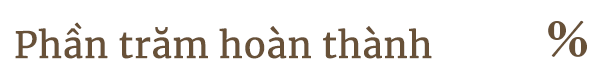
<style>
.page{position:relative;width:600px;height:77px;background:#ffffff}
.page>*{position:absolute;margin:0}
.t1{font:36px "Merriweather-Regular";color:#685138;font-weight:bold}
</style>
<div class="page">
<p class="t1" style="left:15px;top:22px;width:417px;height:37px">Phần trăm hoàn thành</p>
</div>
